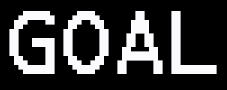
<style>
.page{position:relative;width:227px;height:90px;background:#000000}
.page>*{position:absolute;margin:0}
.t1{font:72px "Terminal";color:#fbfbfd}
</style>
<div class="page">
<p class="t1" style="left:9px;top:11px;width:208px;height:63px">GOAL</p>
</div>
